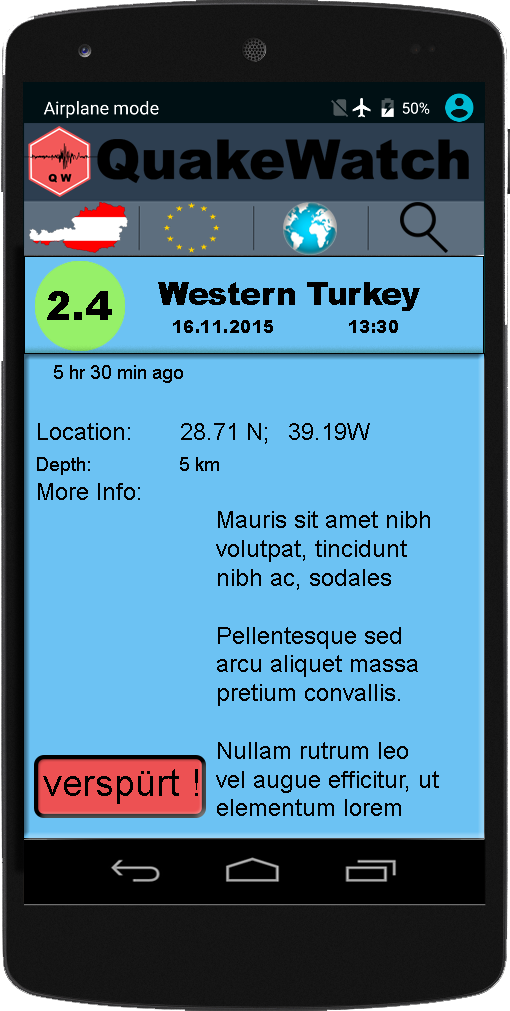
<style>
.page{position:relative;width:510px;height:1011px;background:#6cc2f3}
.page>*{position:absolute;margin:0}
.t1{font:40px "Arial-Black";color:#000000}
.t2{font:32px "Arial-Black";color:#000000;scale:0.96 1}
.t3{font:17.9px "Arial-Black";color:#000000;scale:0.94 1}
.t4{font:44.7px "Arial-Black";color:#000000;scale:0.94 1}
.t5{font:18.7px "ArialMT";color:#000000}
.t6{font:18.7px "ArialMT";color:#19b07c}
.t7{font:24px "ArialMT";color:#000000}
</style>
<div class="page">
<p class="t1" style="left:47px;top:291px;width:65px;height:29px">2.4</p>
<p class="t2" style="left:158px;top:282px;width:262px;height:29px">Western Turkey</p>
<p class="t3" style="left:173px;top:320px;width:225px;height:13px"><span class="t4"> </span>16.11.2015  13:30</p>
<p class="t5" style="left:54px;top:365px;width:129px;height:18px"><span class="t6"> </span>5 hr 30 min ago</p>
<p class="t7" style="left:38px;top:423px;width:332px;height:21px">Location:  28.71 N; 39.19W</p>
<p class="t5" style="left:37px;top:457px;width:182px;height:18px">Depth:   5 km</p>
<p class="t7" style="left:38px;top:483px;width:401px;height:333px">More Info:    <br>         Mauris sit amet nibh       volutpat, tincidunt        nibh ac, sodales <br>    <br>     Pellentesque sed <br>     arcu aliquet massa        pretium convallis.<br>    <br>     Nullam rutrum leo <br>     vel augue efficitur, ut       elementum lorem porttitor.<br>    Nulla egestas odio vel velit maximus blandit.</p>
</div>
